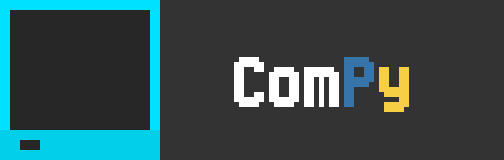
<style>
.page{position:relative;width:504px;height:160px;background:#333333}
.page>*{position:absolute;margin:0}
.t1{font:100px "MiniPixel-7";color:#ffffff}
.t2{font:100px "MiniPixel-7";color:#3674a9}
.t3{font:100px "MiniPixel-7";color:#f7cf44}
</style>
<div class="page">
<p class="t1" style="left:234px;top:57px;width:175px;height:55px">Com<span class="t2">P</span><span class="t3">y</span></p>
</div>
